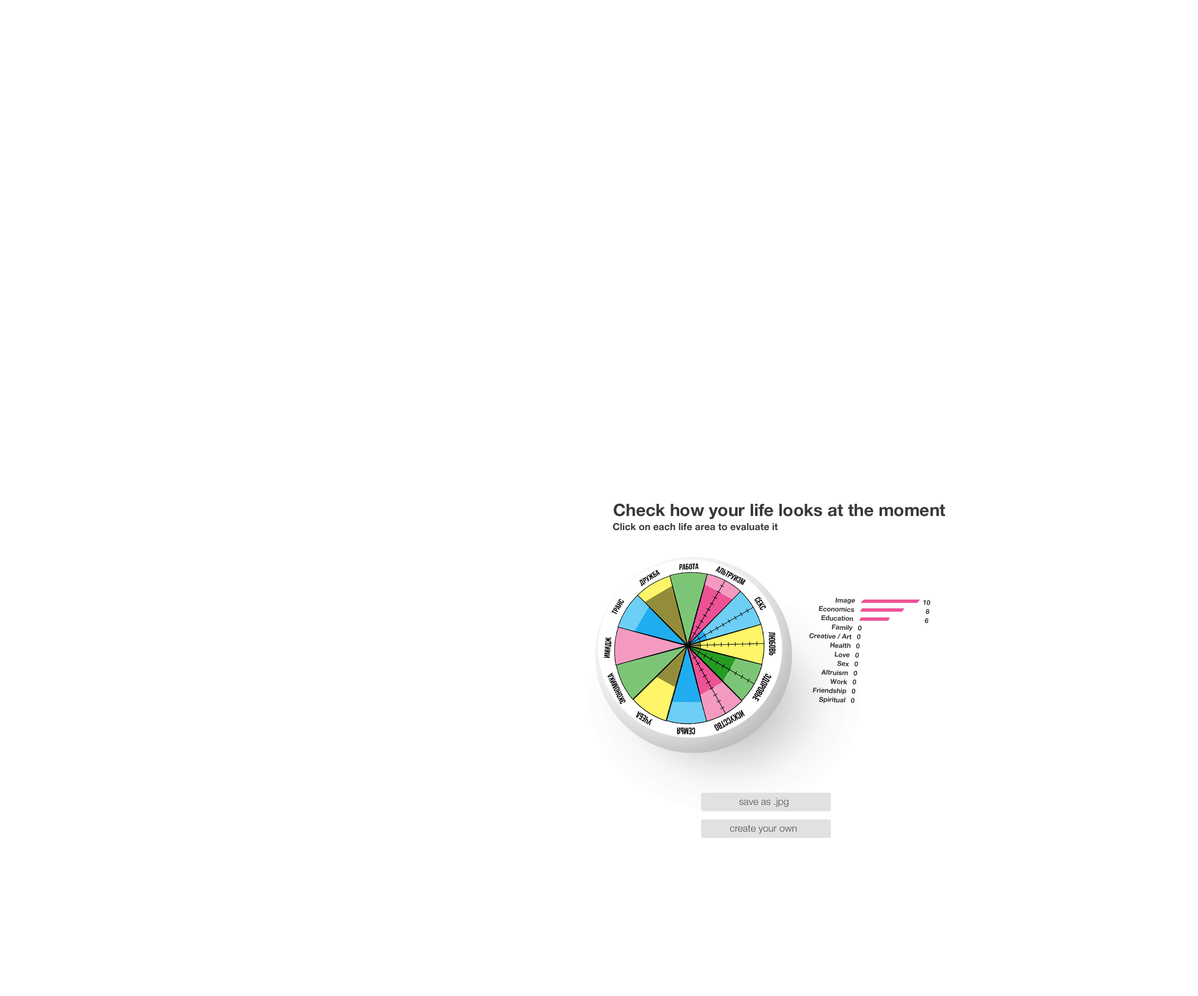
<style>
.page{position:relative;width:1198px;height:996px;background:#ffffff}
.page>*{position:absolute;margin:0}
.t1{font:17px "HelveticaNeueLTPro-Bd";color:#393939}
.t2{font:9.7px "HelveticaNeueLTPro-Bd";color:#393939}
.t3{font:6.7px/9.1px "HelveticaNeueLTPro-Bd";color:#393939}
.t4{font:9.7px "HelveticaNeueLTPro-Lt";color:#393939}
</style>
<div class="page">
<p class="t1" style="left:613px;top:503px;width:332px;height:16px">Check how your life looks at the moment</p>
<p class="t2" style="left:612px;top:523px;width:166px;height:7px">Click on each life area to evaluate it</p>
<p class="t3" style="left:809px;top:597px;width:46px;height:106px;text-align:right;rotate:1deg">Image <br>Economics<br>Education<br>Family<br>Creative / Art<br>Health<br>Love<br>Sex<br>Altruism<br>Work<br>Friendship<br>Spiritual</p>
<p class="t3" style="left:851px;top:599px;width:79px;height:104px;rotate:1deg">10<br>        8<br>        6<br>0<br>0<br>0<br>0<br>0<br>0<br>0<br>0<br>0</p>
<p class="t4" style="left:739px;top:797px;width:49px;height:10px">save as .jpg</p>
<p class="t4" style="left:730px;top:824px;width:67px;height:9px">create your own</p>
</div>
